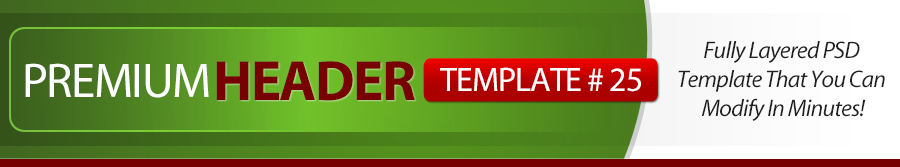
<style>
.page{position:relative;width:900px;height:167px}
.page>*{position:absolute;margin:0}
.t1{font:24px "Myriad-Italic";letter-spacing:-0.03em;color:#212121}
.t2{font:49.1px "MyriadPro-Regular";letter-spacing:-0.03em;color:#fefefe;text-transform:uppercase}
.t3{font:57.3px "MyriadPro-Bold";letter-spacing:-0.03em;color:#770000;text-transform:uppercase}
.t4{font:34px "MyriadPro-Regular";letter-spacing:-0.03em;color:#ffffff;text-transform:uppercase}
</style>
<div class="page">
<p class="t1" style="left:678px;top:41px;width:207px;height:80px;text-align:center">Fully Layered PSD <br>Template That You Can <br>Modify In Minutes!</p>
<p class="t2" style="left:25px;top:63px;width:184px;height:35px">Premium</p>
<p class="t3" style="left:216px;top:61px;width:199px;height:40px">Header</p>
<p class="t4" style="left:440px;top:67px;width:201px;height:25px">Template # 25</p>
</div>
